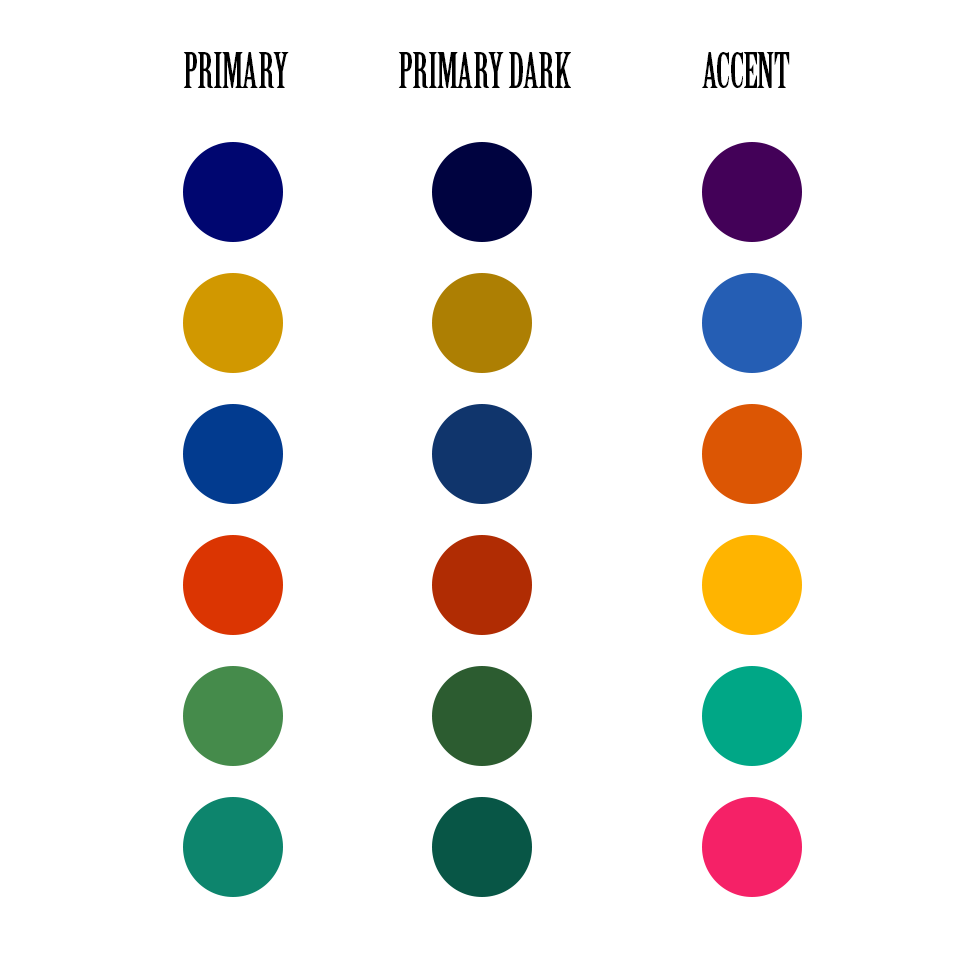
<style>
.page{position:relative;width:960px;height:960px;background:#ffffff}
.page>*{position:absolute;margin:0}
.t1{font:48px "BirchStd";letter-spacing:-0.01em;color:#000000}
</style>
<div class="page">
<p class="t1" style="left:183px;top:52px;width:106px;height:36px">PRIMARY</p>
<p class="t1" style="left:398px;top:52px;width:173px;height:36px">PRIMARY DARK</p>
<p class="t1" style="left:702px;top:52px;width:88px;height:36px">ACCENT</p>
</div>
